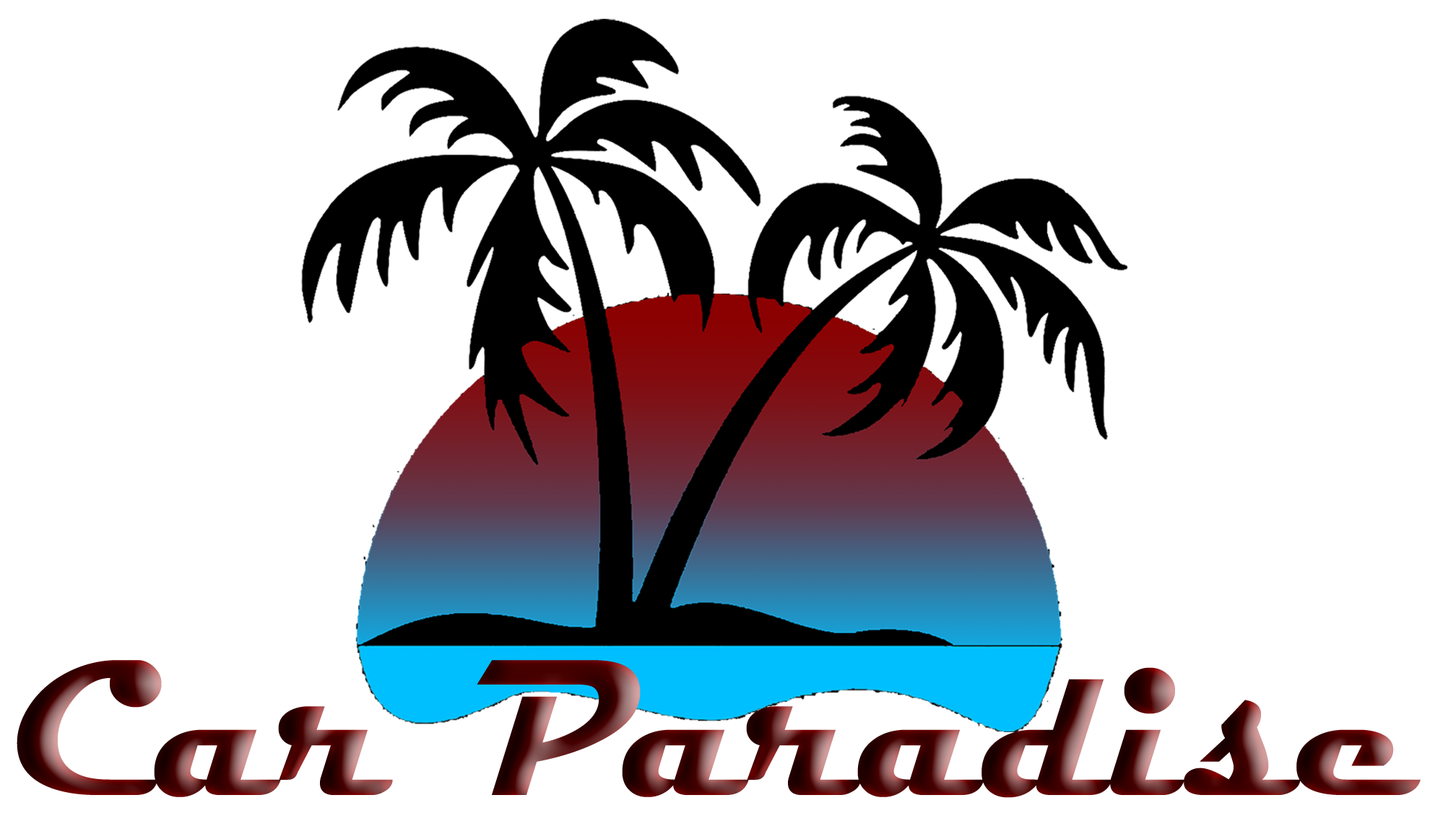
<style>
.page{position:relative;width:1430px;height:834px;background:#ffffff}
.page>*{position:absolute;margin:0}
.t1{font:196.1px "Magneto-Bold"}
</style>
<div class="page">
<p class="t1" style="left:17px;top:660px;width:1403px;height:138px">Car Paradise</p>
</div>
